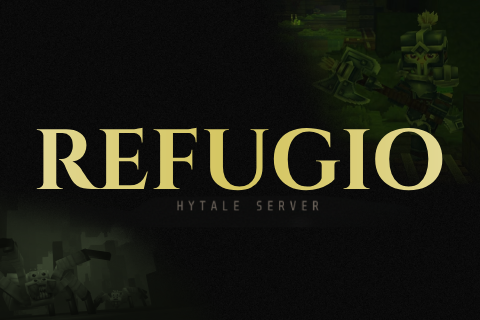
<style>
.page{position:relative;width:480px;height:320px}
.page>*{position:absolute;margin:0}
.t1{font:85.4px "CinzelRoman-Bold";color:#e6d275}
</style>
<div class="page">
<p class="t1" style="left:36px;top:127px;width:407px;height:64px">REFUGIO</p>
</div>
